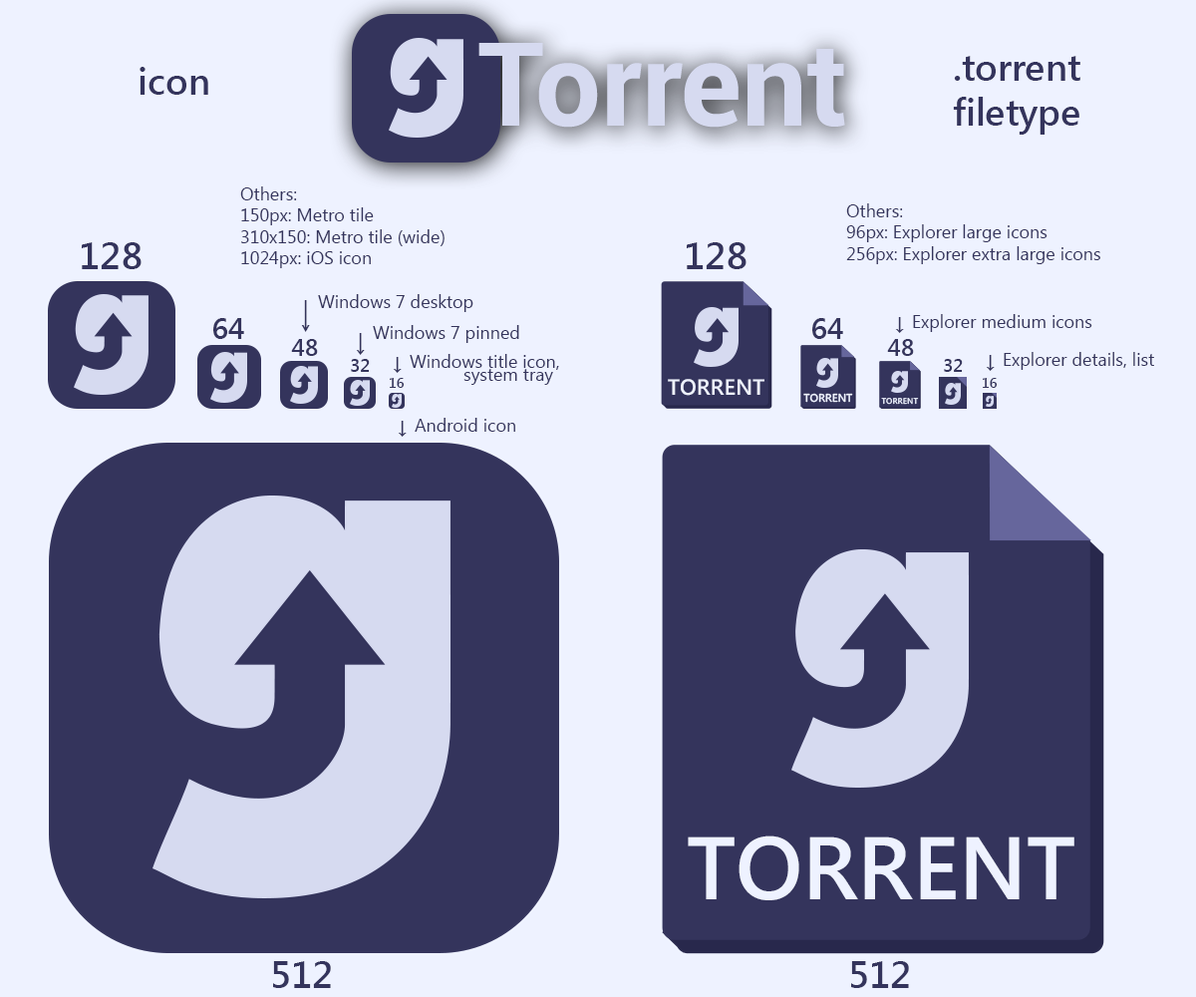
<style>
.page{position:relative;width:1196px;height:997px;background:#eef2ff}
.page>*{position:absolute;margin:0}
.t1{font:116px "Roboto-Bold";color:#d6daf0}
.t2{font:37.7px "SegoeUI-SemiBold";color:#34345c}
.t3{font:17.9px "SegoeUI";color:#34345c}
.t4{font:47.8px "SegoeUI";color:#34345c;scale:0.5 1}
.t5{font:29.9px "SegoeUI-SemiBold";color:#34345c}
.t6{font:23.9px "SegoeUI";color:#34345c}
.t7{font:31.6px "SegoeUI";color:#34345c;scale:0.76 1}
.t8{font:23.9px "SegoeUI-SemiBold";color:#34345c}
.t9{font:17.9px/13px "SegoeUI";color:#34345c}
.t10{font:23.9px/13px "SegoeUI";color:#34345c}
.t11{font:17.9px "SegoeUI-SemiBold";color:#34345c}
.t12{font:14px "SegoeUI-SemiBold";color:#34345c}
.t13{font:22.2px "SegoeUI-SemiBold";color:#eef2ff}
.t14{font:11.1px "SegoeUI-SemiBold";color:#eef2ff}
.t15{font:8.3px "SegoeUI-SemiBold";color:#eef2ff}
.t16{font:88.8px "SegoeUI-SemiBold";color:#eef2ff}
</style>
<div class="page">
<p class="t1" style="left:478px;top:43px;width:367px;height:85px">Torrent</p>
<p class="t2" style="left:953px;top:56px;width:128px;height:79px;text-align:center">.torrent<br>filetype</p>
<p class="t2" style="left:140px;top:67px;width:68px;height:28px">icon</p>
<p class="t3" style="left:240px;top:186px;width:205px;height:82px">Others:<br>150px: Metro tile<br>310x150: Metro tile (wide)<br>1024px: iOS icon</p>
<p class="t3" style="left:846px;top:203px;width:255px;height:61px">Others:<br>96px: Explorer large icons<br>256px: Explorer extra large icons</p>
<p class="t2" style="left:82px;top:242px;width:60px;height:27px">128</p>
<p class="t2" style="left:687px;top:242px;width:60px;height:27px">128</p>
<p class="t3" style="left:301px;top:294px;width:172px;height:38px"><span class="t4">↓ </span>Windows 7 desktop</p>
<p class="t5" style="left:213px;top:318px;width:31px;height:21px">64</p>
<p class="t5" style="left:812px;top:318px;width:31px;height:21px">64</p>
<p class="t3" style="left:895px;top:314px;width:198px;height:19px"><span class="t6">↓ </span>Explorer medium icons</p>
<p class="t3" style="left:356px;top:325px;width:163px;height:30px"><span class="t7">↓ </span>Windows 7 pinned</p>
<p class="t8" style="left:291px;top:339px;width:27px;height:17px">48</p>
<p class="t8" style="left:887px;top:339px;width:27px;height:17px">48</p>
<p class="t9" style="left:393px;top:354px;width:166px;height:31px"><span class="t10">↓ </span>Windows title icon,<br>  system tray</p>
<p class="t3" style="left:986px;top:352px;width:168px;height:19px"><span class="t6">↓ </span>Explorer details, list</p>
<p class="t11" style="left:351px;top:359px;width:19px;height:13px">32</p>
<p class="t11" style="left:944px;top:359px;width:19px;height:13px">32</p>
<p class="t12" style="left:390px;top:378px;width:15px;height:10px">16</p>
<p class="t12" style="left:983px;top:378px;width:15px;height:10px">16</p>
<p class="t13" style="left:668px;top:379px;width:97px;height:17px">TORRENT</p>
<p class="t14" style="left:803px;top:393px;width:50px;height:10px">TORRENT</p>
<p class="t15" style="left:881px;top:398px;width:38px;height:7px">TORRENT</p>
<p class="t3" style="left:398px;top:418px;width:117px;height:19px"><span class="t6">↓ </span>Android icon</p>
<p class="t16" style="left:688px;top:835px;width:387px;height:65px">TORRENT</p>
<p class="t2" style="left:273px;top:961px;width:58px;height:27px">512</p>
<p class="t2" style="left:851px;top:961px;width:58px;height:27px">512</p>
</div>
